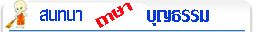
<style>
.page{position:relative;width:253px;height:32px;background:#ffffff}
.page>*{position:absolute;margin:0}
.t1{font:24px "LilyUPC";color:#fc0612;scale:1.36 1}
.t2{font:26.9px "LilyUPC";color:#0739da}
.t3{font:31px "LilyUPC";color:#0739da}
</style>
<div class="page">
<p class="t1" style="left:95px;top:3px;width:38px;height:25px;rotate:-29deg">ถาษา</p>
<p class="t2" style="left:40px;top:9px;width:42px;height:12px">สนทนา</p>
<p class="t3" style="left:147px;top:9px;width:62px;height:17px">บุญธรรม</p>
</div>
